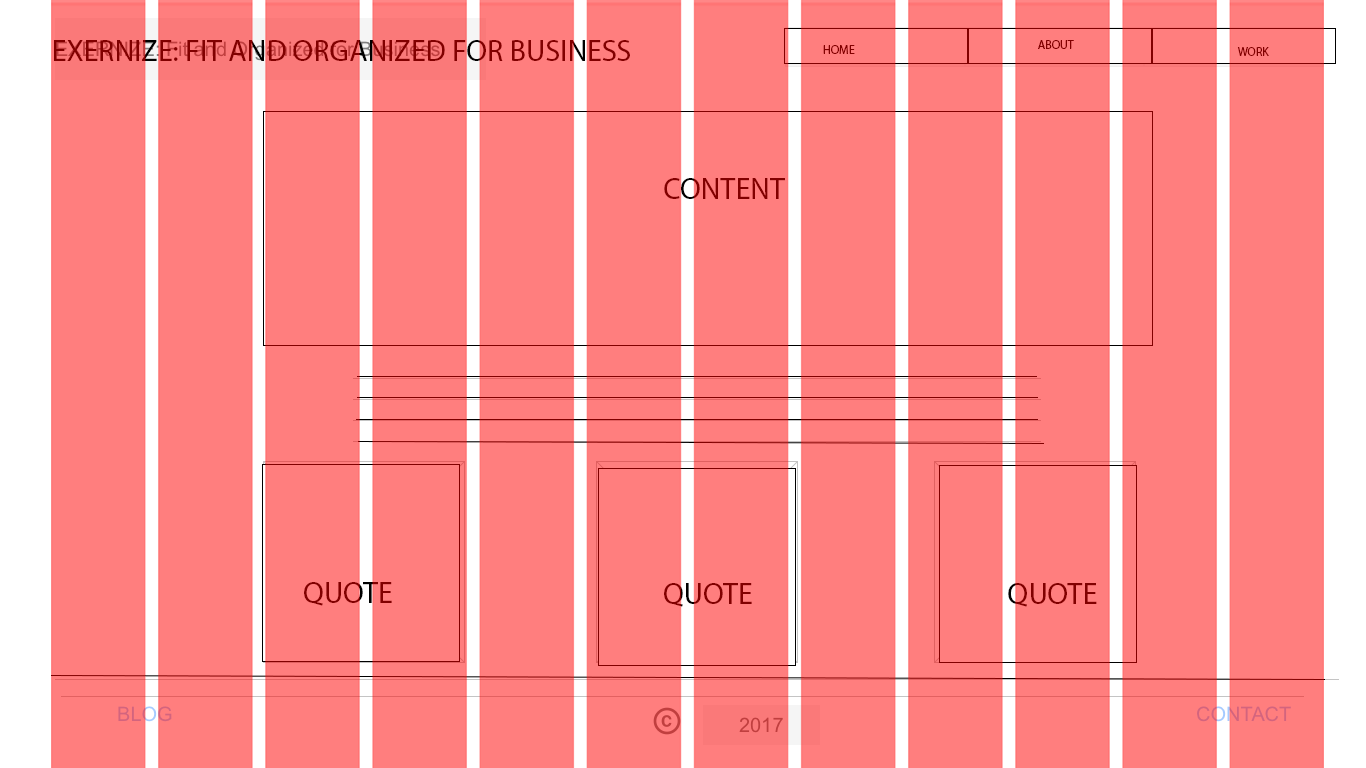
<style>
.page{position:relative;width:1366px;height:768px;background:#ff7e7e}
.page>*{position:absolute;margin:0}
.t1{font:30px "MyriadPro-Regular";color:#810000}
.t2{font:12px "MyriadPro-Regular";color:#810000}
</style>
<div class="page">
<p class="t1" style="left:54px;top:40px;width:576px;height:21px">EXERNIZE: FIT AND ORGANIZED FOR BUSINESS</p>
<p class="t2" style="left:1038px;top:40px;width:36px;height:9px">ABOUT</p>
<p class="t2" style="left:823px;top:45px;width:32px;height:9px">HOME</p>
<p class="t2" style="left:1237px;top:47px;width:32px;height:9px">WORK</p>
<p class="t1" style="left:664px;top:178px;width:121px;height:21px">CONTENT</p>
<p class="t1" style="left:304px;top:582px;width:88px;height:24px">QUOTE</p>
<p class="t1" style="left:664px;top:583px;width:88px;height:24px">QUOTE</p>
<p class="t1" style="left:1008px;top:583px;width:89px;height:24px">QUOTE</p>
</div>
